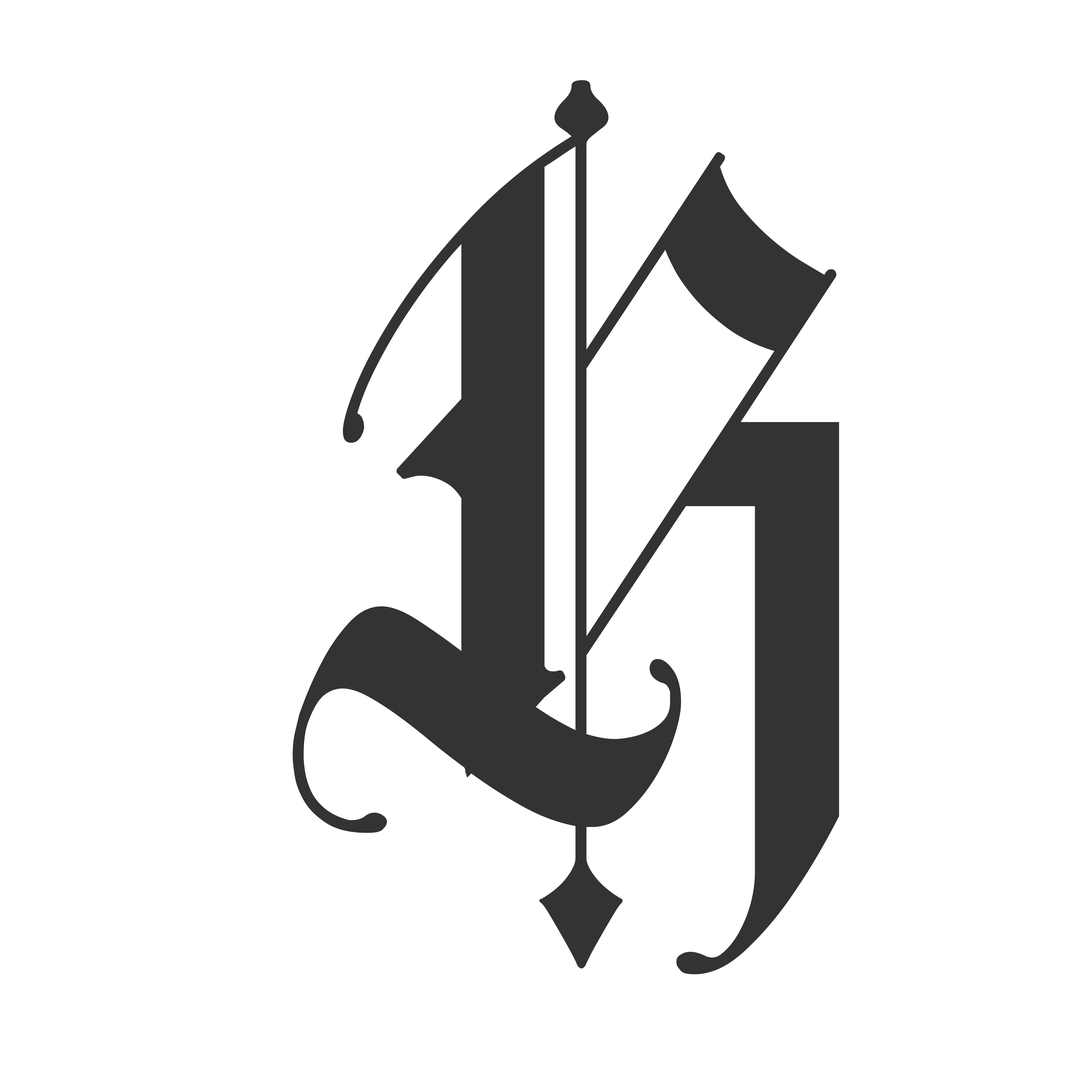
<style>
.page{position:relative;width:1092px;height:1092px;background:#ffffff}
.page>*{position:absolute;margin:0}
.t1{font:975.2px "Obituary-Regular";letter-spacing:0.08em;color:#333333;font-weight:bold}
</style>
<div class="page">
<p class="t1" style="left:293px;top:80px;width:546px;height:894px">R</p>
</div>
